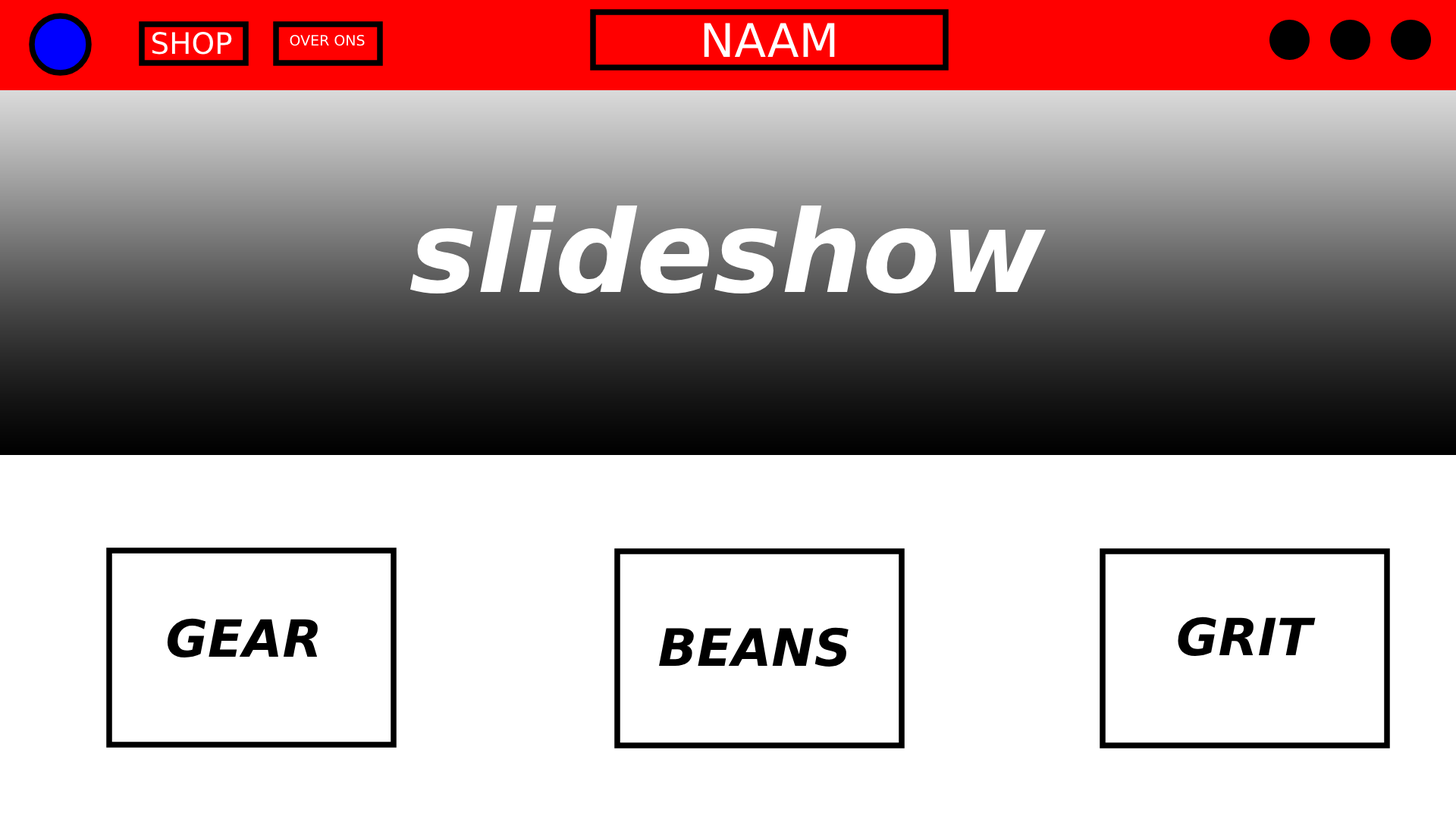
<style>
.page{position:relative;width:1456px;height:819px;background:#ffffff}
.page>*{position:absolute;margin:0}
.t1{font:46.3px "DejaVuSans";color:#ffffff}
.t2{font:29.6px "DejaVuSans";color:#ffffff}
.t3{font:14.4px "DejaVuSans";color:#ffffff}
.t4{font:113.7px "DejaVuSans-BoldOblique";color:#ffffff}
.t5{font:51.3px "DejaVuSans-BoldOblique";color:#000000}
.t6{font:51.4px "DejaVuSans-BoldOblique";color:#000000}
</style>
<div class="page">
<p class="t1" style="left:704px;top:23px;width:131px;height:34px">NAAM</p>
<p class="t2" style="left:152px;top:32px;width:80px;height:23px">SHOP</p>
<p class="t3" style="left:290px;top:34px;width:75px;height:12px">OVER ONS</p>
<p class="t4" style="left:410px;top:206px;width:636px;height:88px">slideshow</p>
<p class="t5" style="left:1178px;top:617px;width:138px;height:39px">GRIT</p>
<p class="t5" style="left:167px;top:618px;width:151px;height:39px">GEAR</p>
<p class="t6" style="left:659px;top:627px;width:190px;height:40px">BEANS</p>
</div>
